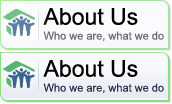
<style>
.page{position:relative;width:172px;height:104px}
.page>*{position:absolute;margin:0}
.t1{font:11px/15px "ArialMT";color:#6a6c75}
.t2{font:23px/15px "ArialMT";color:#000000}
.t3{font:11px/15px "ArialMT";color:#253355}
</style>
<div class="page">
<p class="t1" style="left:43px;top:8px;width:121px;height:34px"><span class="t2">About Us<br></span>Who we are, what we do</p>
<p class="t3" style="left:43px;top:60px;width:121px;height:34px"><span class="t2">About Us<br></span>Who we are, what we do</p>
</div>
